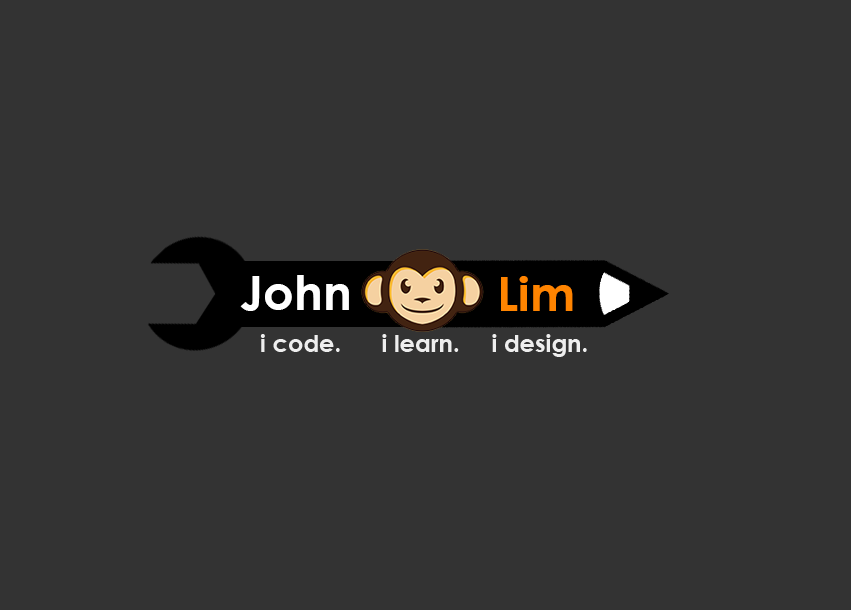
<style>
.page{position:relative;width:851px;height:610px;background:#333333}
.page>*{position:absolute;margin:0}
.t1{font:48px "CenturyGothic-Bold";color:#ffffff}
.t2{font:48px "CenturyGothic-Bold";color:#ff8400}
.t3{font:24px "CenturyGothic-Bold";color:#eeeeee}
</style>
<div class="page">
<p class="t1" style="left:240px;top:275px;width:109px;height:36px">John</p>
<p class="t2" style="left:501px;top:276px;width:72px;height:35px">Lim</p>
<p class="t3" style="left:260px;top:334px;width:80px;height:18px">i code.</p>
<p class="t3" style="left:382px;top:334px;width:77px;height:18px">i learn.</p>
<p class="t3" style="left:492px;top:334px;width:95px;height:23px">i design.</p>
</div>
